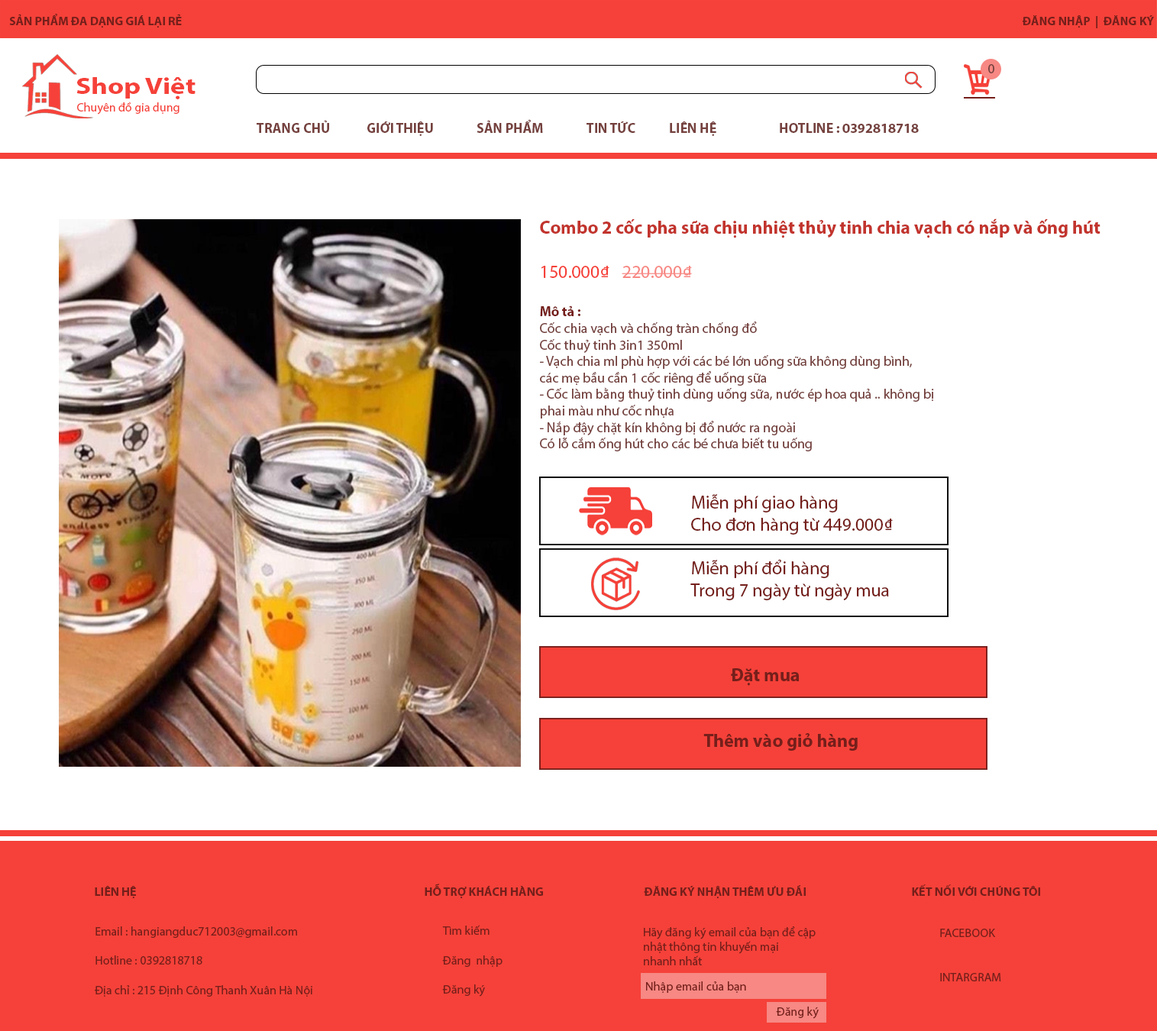
<style>
.page{position:relative;width:1157px;height:1031px;background:#ffffff}
.page>*{position:absolute;margin:0}
.t1{font:12.2px "MyriadPro-Bold";color:#751f1b}
.t2{font:13.7px "MyriadPro-Regular";color:#75413e}
.t3{font:23.8px "MyriadPro-Bold";color:#f54139;scale:1.19 1}
.t4{font:12.2px "MyriadPro-Regular";color:#f54139}
.t5{font:12.2px "MyriadPro-Regular";color:#ffffff}
.t6{font:13.7px "MyriadPro-Bold";color:#75413e}
.t7{font:18.3px "MyriadPro-Bold";color:#c2342d}
.t8{font:18.3px "MyriadPro-Regular";color:#f54139}
.t9{font:18.3px "MyriadPro-Regular";color:#f78883}
.t10{font:13.7px "MyriadPro-Bold";color:#751f1b}
.t11{font:18.3px "MyriadPro-Regular";color:#751f1b}
.t12{font:18.3px "MyriadPro-Bold";color:#751f1b}
.t13{font:12.2px "MyriadPro-Bold";color:#751f1b;text-transform:uppercase}
.t14{font:12.2px "MyriadPro-Regular";color:#751f1b}
</style>
<div class="page">
<p class="t1" style="left:9px;top:14px;width:173px;height:14px">SẢN PHẨM ĐA DẠNG GIÁ LẠI RẺ</p>
<p class="t1" style="left:1022px;top:15px;width:132px;height:13px">ĐĂNG NHẬP  |  ĐĂNG KÝ</p>
<p class="t2" style="left:988px;top:64px;width:6px;height:9px">0</p>
<p class="t3" style="left:76px;top:77px;width:119px;height:22px">Shop Việt</p>
<p class="t4" style="left:72px;top:102px;width:107px;height:13px"><span class="t5">s</span>Chuyên đồ gia dụng</p>
<p class="t6" style="left:257px;top:119px;width:662px;height:17px">TRANG CHỦ   GIỚI THIỆU  SẢN PHẨM   TIN TỨC  LIÊN HỆ   HOTLINE : 0392818718</p>
<p class="t2" style="left:540px;top:218px;width:560px;height:233px"><span class="t7">Combo 2 cốc pha sữa chịu nhiệt thủy tinh chia vạch có nắp và ống hút<br><br></span><span class="t8">150.000₫ </span><span class="t9">220.000₫<br><br></span><span class="t10">Mô tả :<br></span>Cốc chia vạch và chống tràn chống đổ<br>Cốc thuỷ tinh 3in1 350ml<br>- Vạch chia ml phù hợp với các bé lớn uống sữa không dùng bình, <br>các mẹ bầu cần 1 cốc riêng để uống sữa<br>- Cốc làm bằng thuỷ tinh dùng uống sữa, nước ép hoa quả .. không bị <br>phai màu như cốc nhựa<br>- Nắp đậy chặt kín không bị đổ nước ra ngoài<br>Có lỗ cắm ống hút cho các bé chưa biết tu uống</p>
<p class="t11" style="left:690px;top:494px;width:203px;height:106px">Miễn phí giao hàng<br>Cho đơn hàng từ 449.000₫<br><br>Miễn phí đổi hàng<br>Trong 7 ngày từ ngày mua</p>
<p class="t12" style="left:703px;top:668px;width:154px;height:83px">Đặt mua<br><br><br>Thêm vào giỏ hàng</p>
<p class="t13" style="left:95px;top:883px;width:945px;height:16px"><span class="t1">LIÊN HỆ             HỖ TRỢ KHÁCH HÀNG     </span>Đăng ký nhận thêm ưu đãi             Kết nối với chúng tôi</p>
<p class="t14" style="left:95px;top:926px;width:217px;height:70px">Email : hangiangduc712003@gmail.com<br><br>Hotline : 0392818718<br><br>Địa chỉ : 215 Định Công Thanh Xuân Hà Nội</p>
<p class="t14" style="left:442px;top:925px;width:60px;height:71px">Tìm kiếm<br><br>Đăng  nhập<br><br>Đăng ký</p>
<p class="t14" style="left:644px;top:926px;width:171px;height:39px">Hãy đăng ký email của bạn để cập <br>nhật thông tin khuyến mại<br>nhanh nhất</p>
<p class="t14" style="left:940px;top:928px;width:61px;height:53px">FACEBOOK<br><br><br>INTARGRAM</p>
<p class="t14" style="left:646px;top:981px;width:100px;height:12px">Nhập email của bạn</p>
<p class="t14" style="left:776px;top:1006px;width:43px;height:13px">Đăng ký</p>
</div>
